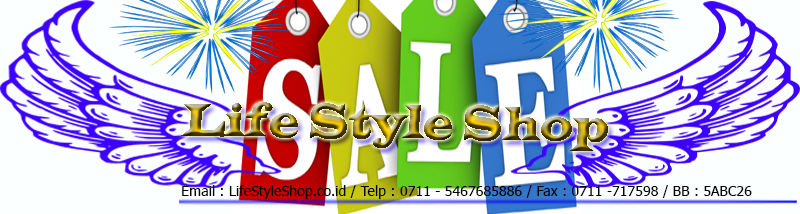
<style>
.page{position:relative;width:800px;height:214px;background:#fcffff}
.page>*{position:absolute;margin:0}
.t1{font:48px "LatinWide";font-style:italic;scale:0.7 1}
.t2{font:14.2px "Tahoma";color:#030303}
</style>
<div class="page">
<p class="t1" style="left:181px;top:102px;width:427px;height:49px;rotate:1deg">Life Style Shop</p>
<p class="t2" style="left:182px;top:185px;width:570px;height:14px">Email : LifeStyleShop.co.id / Telp : 0711 - 5467685886 / Fax : 0711 -717598 / BB : 5ABC26</p>
</div>
